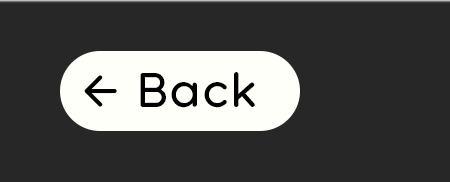
<style>
.page{position:relative;width:450px;height:182px;background:#272727}
.page>*{position:absolute;margin:0}
.t1{font:50px "PollyRounded-Regular";color:#000000}
</style>
<div class="page">
<p class="t1" style="left:140px;top:72px;width:115px;height:36px">Back</p>
</div>
